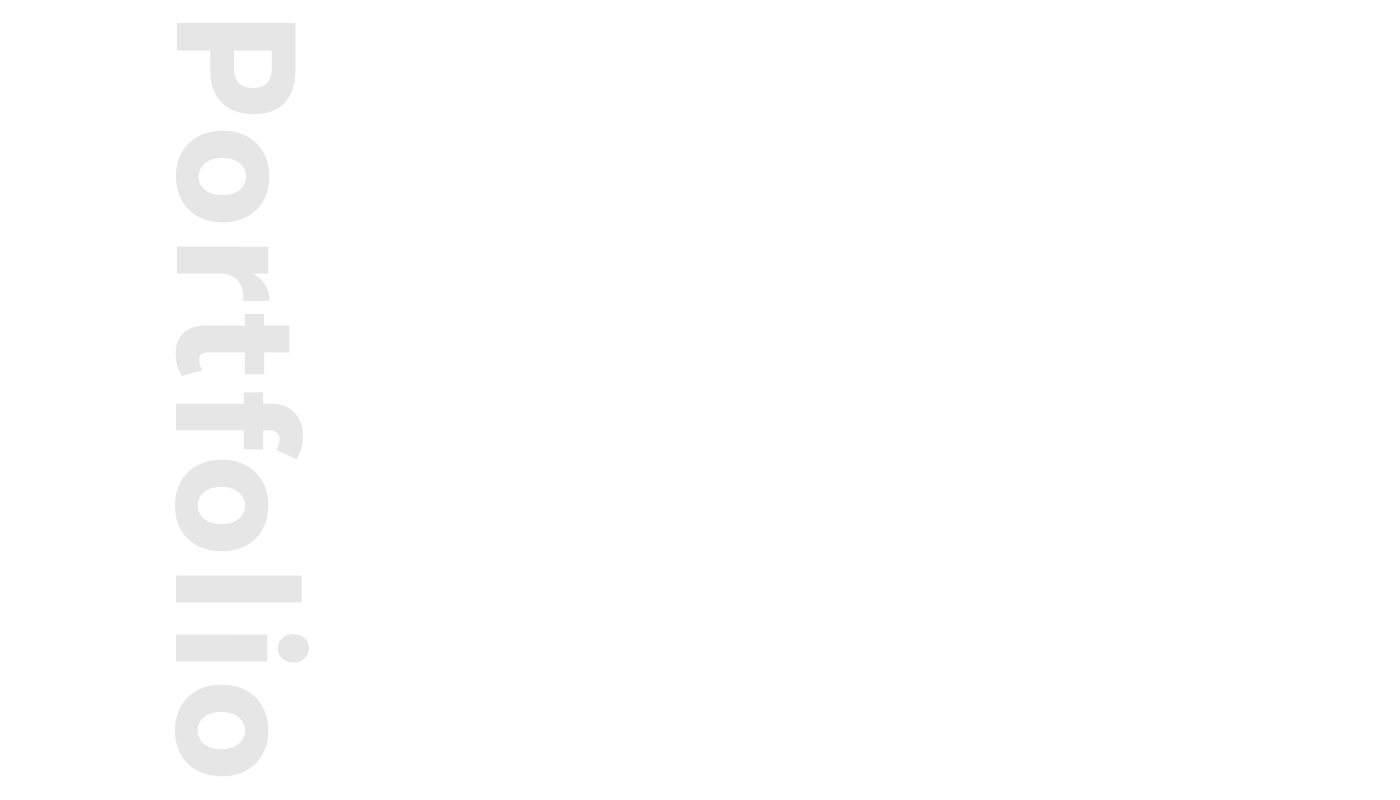
<style>
.page{position:relative;width:1400px;height:800px;background:#ffffff}
.page>*{position:absolute;margin:0}
.t1{font:169.3px "Montserrat-Bold";letter-spacing:0.06em;color:#e6e6e6;scale:0.92 1}
</style>
<div class="page">
<p class="t1" style="left:174px;top:22px;width:135px;height:755px;rotate:90deg">Portfolio</p>
</div>
